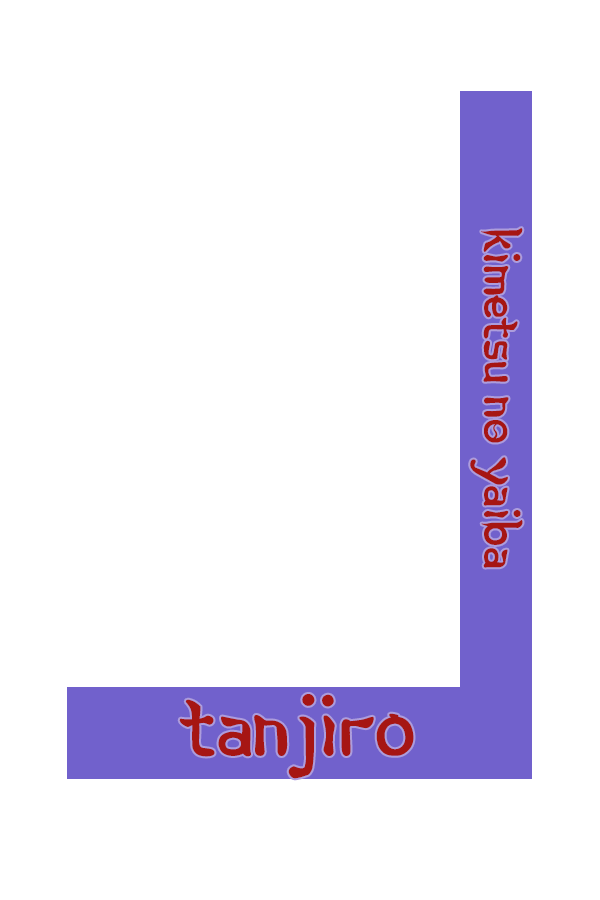
<style>
.page{position:relative;width:600px;height:900px;background:#ffffff}
.page>*{position:absolute;margin:0}
.t1{font:49.7px "Korean-Calligraphy";color:#a61613}
.t2{font:83.3px "Korean-Calligraphy";color:#a61613}
</style>
<div class="page">
<p class="t1" style="left:470px;top:228px;width:53px;height:340px;rotate:90deg">KIMETSU NO YAIBA</p>
<p class="t2" style="left:179px;top:694px;width:235px;height:85px">Tanjiro</p>
</div>
